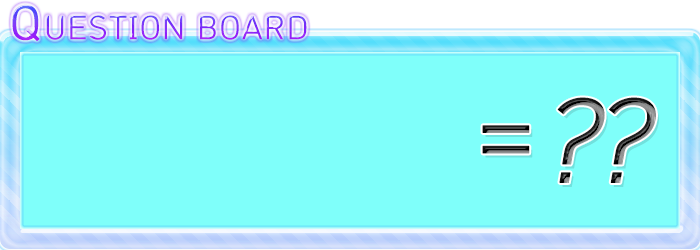
<style>
.page{position:relative;width:700px;height:250px;background:#7ffffa}
.page>*{position:absolute;margin:0}
.t1{font:32.3px "HCRDotum";letter-spacing:0.03em}
.t2{font:46.2px "HCRDotum";letter-spacing:0.03em;font-weight:bold}
.t3{font:105px "HCRDotum";letter-spacing:-0.11em;font-weight:bold;font-style:italic}
.t4{font:105px "HCRDotum";letter-spacing:0.03em;font-weight:bold}
</style>
<div class="page">
<p class="t1" style="left:12px;top:4px;width:295px;height:38px"><span class="t2">Q</span>UESTION BOARD</p>
<p class="t3" style="left:482px;top:97px;width:174px;height:86px"><span class="t4">=</span>??</p>
</div>
